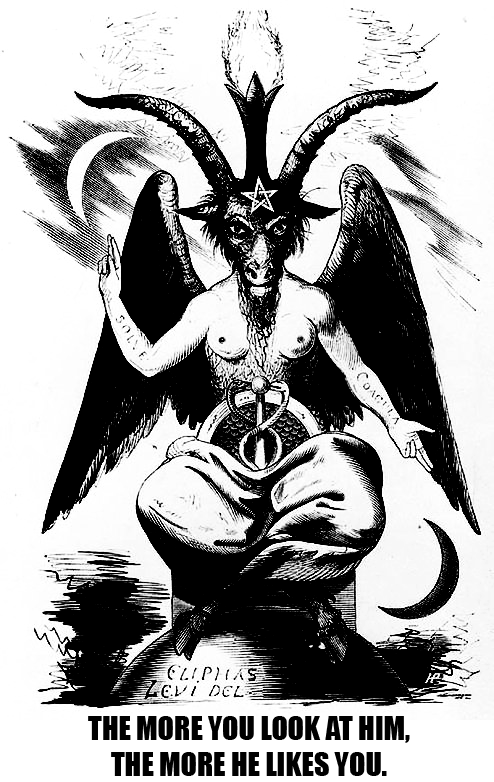
<style>
.page{position:relative;width:494px;height:782px;background:#000000}
.page>*{position:absolute;margin:0}
.t1{font:30px "Impact";color:#000000}
</style>
<div class="page">
<p class="t1" style="left:88px;top:716px;width:322px;height:60px;text-align:center">THE MORE YOU LOOK AT HIM,<br>THE MORE HE LIKES YOU.</p>
</div>
